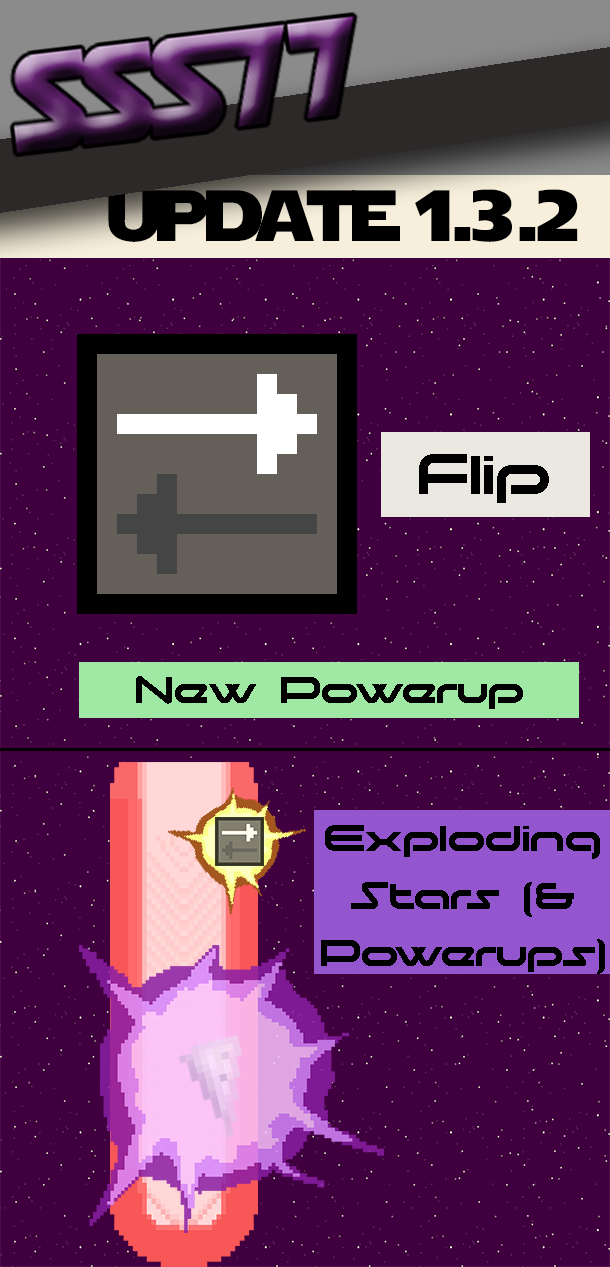
<style>
.page{position:relative;width:610px;height:1267px;background:#400040}
.page>*{position:absolute;margin:0}
.t1{font:72px "StarJedi";color:#000000}
.t2{font:72.9px "moonhouse";color:#000000}
.t3{font:48px "moonhouse";color:#000000}
</style>
<div class="page">
<p class="t1" style="left:108px;top:189px;width:470px;height:53px">update 1.3.2</p>
<p class="t2" style="left:419px;top:454px;width:130px;height:49px">Flip</p>
<p class="t3" style="left:136px;top:676px;width:387px;height:33px">New Powerup</p>
<p class="t3" style="left:321px;top:825px;width:284px;height:149px;text-align:center">Exploding<br>Stars (&amp;<br>Powerups)</p>
</div>
